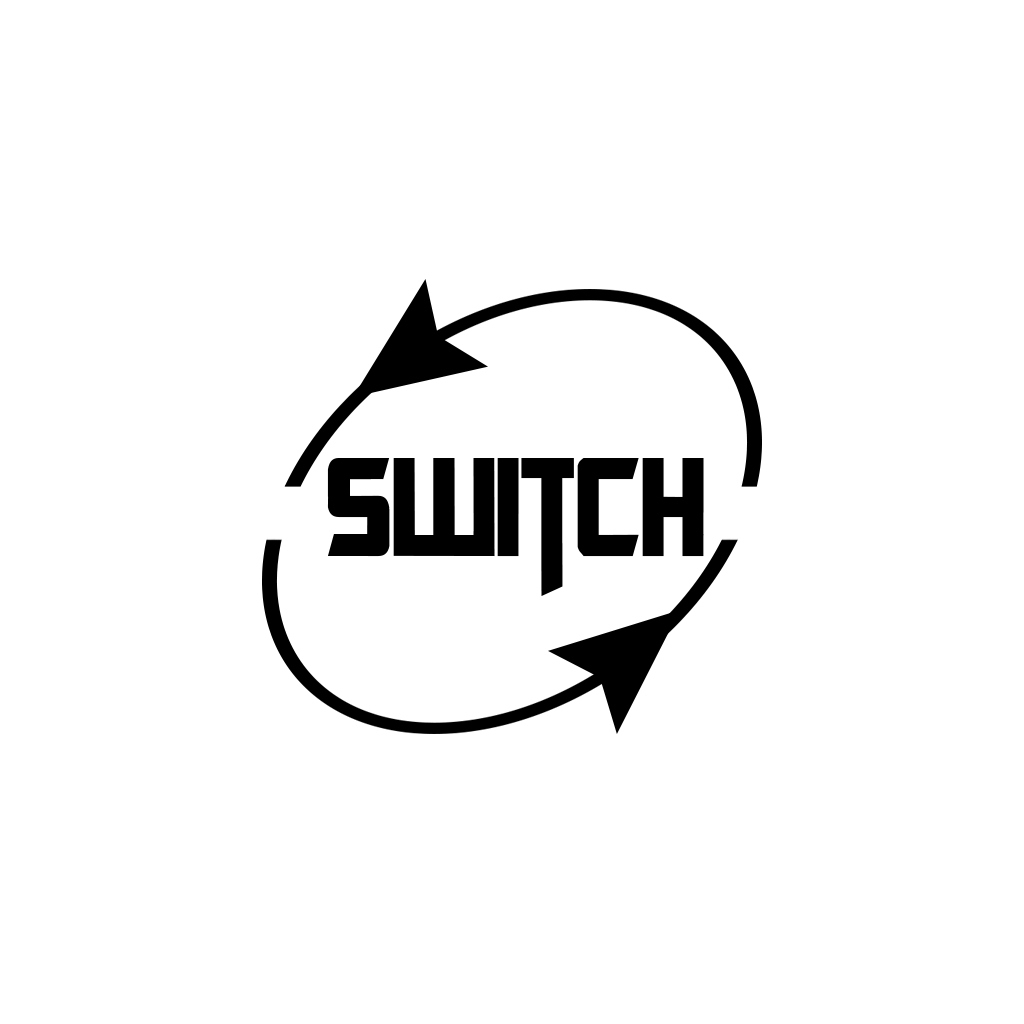
<style>
.page{position:relative;width:1024px;height:1024px;background:#ffffff}
.page>*{position:absolute;margin:0}
.t1{font:156.6px "TransformersMovie";color:#000000;scale:0.79 1}
</style>
<div class="page">
<p class="t1" style="left:327px;top:458px;width:377px;height:138px">Switch</p>
</div>
